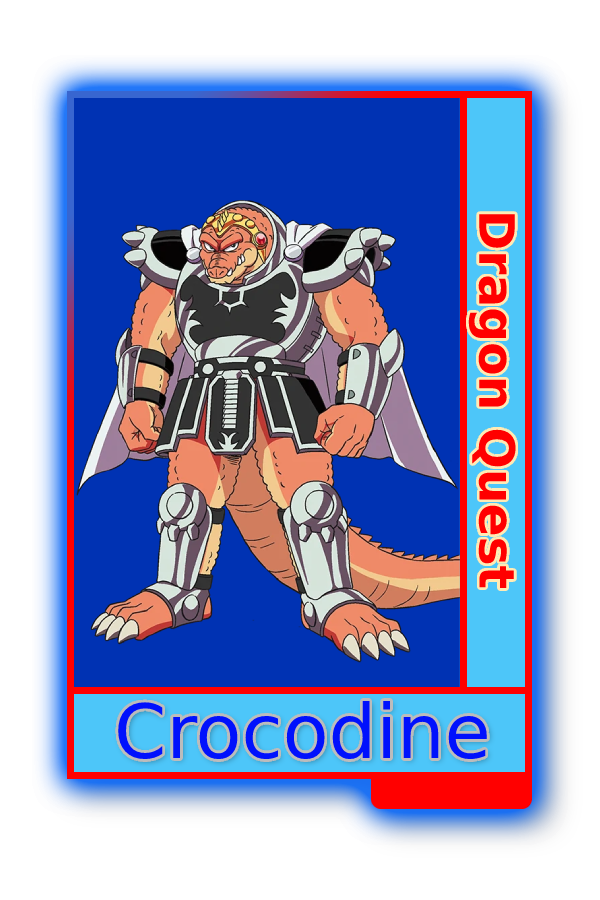
<style>
.page{position:relative;width:600px;height:900px;background:#0032b3}
.page>*{position:absolute;margin:0}
.t1{font:48.8px "MADETOMMY-Bold";color:#ff0000}
.t2{font:75px "CoolveticaRg-Regular";color:#0011fd}
</style>
<div class="page">
<p class="t1" style="left:468px;top:214px;width:48px;height:374px;rotate:90deg">Dragon Quest</p>
<p class="t2" style="left:118px;top:701px;width:369px;height:59px">Crocodine</p>
</div>
